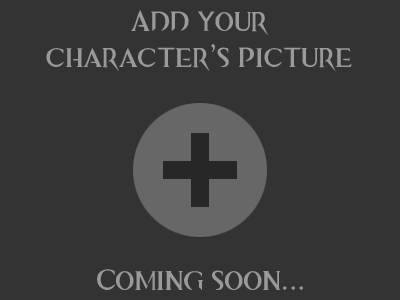
<style>
.page{position:relative;width:400px;height:300px;background:#333333}
.page>*{position:absolute;margin:0}
.t1{font:30px "GWTwoFontVersion1.1";color:#9a9a9a}
</style>
<div class="page">
<p class="t1" style="left:46px;top:10px;width:306px;height:61px;text-align:center">Add your<br>character’s picture</p>
<p class="t1" style="left:97px;top:269px;width:206px;height:21px">Coming soon...</p>
</div>
